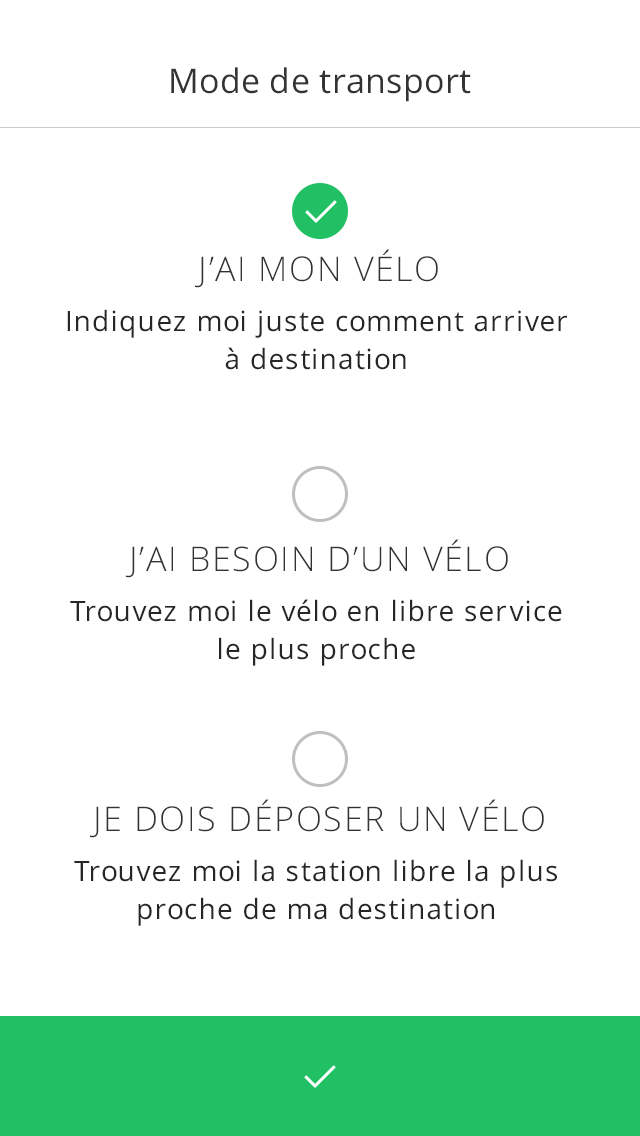
<style>
.page{position:relative;width:640px;height:1136px;background:#ffffff}
.page>*{position:absolute;margin:0}
.t1{font:34px "OpenSans";letter-spacing:0.01em;color:#333333}
.t2{font:34px "OpenSans-Light";letter-spacing:0.05em;color:#333333;text-transform:uppercase}
.t3{font:28px/38px "OpenSans";letter-spacing:0.025em;color:#262626}
</style>
<div class="page">
<p class="t1" style="left:171px;top:67px;width:300px;height:35px">Mode de transport</p>
<p class="t2" style="left:195px;top:249px;width:243px;height:39px">J’ai mon vélo</p>
<p class="t3" style="left:67px;top:309px;width:500px;height:61px;text-align:center">Indiquez moi juste comment arriver à destination</p>
<p class="t2" style="left:126px;top:539px;width:382px;height:39px">J’ai besoin d’un Vélo</p>
<p class="t3" style="left:70px;top:599px;width:492px;height:67px;text-align:center">Trouvez moi le vélo en libre service le plus proche</p>
<p class="t2" style="left:90px;top:799px;width:454px;height:39px">Je dois déposer un Vélo</p>
<p class="t3" style="left:74px;top:859px;width:483px;height:67px;text-align:center">Trouvez moi la station libre la plus proche de ma destination</p>
</div>
